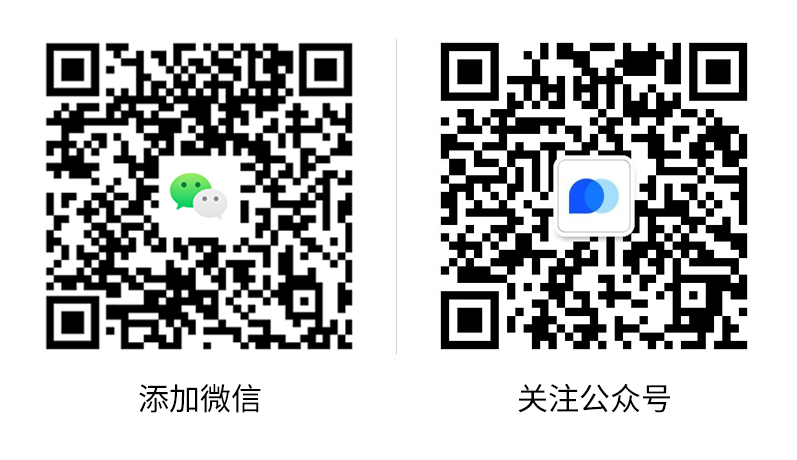
<style>
.page{position:relative;width:797px;height:460px;background:#ffffff}
.page>*{position:absolute;margin:0}
.t1{font:31px "SourceHanSansCNVF-Regular";color:#000000;font-style:italic}
</style>
<div class="page">
<p class="t1" style="left:139px;top:384px;width:122px;height:29px">添加微信</p>
<p class="t1" style="left:518px;top:383px;width:152px;height:30px">关注公众号</p>
</div>
